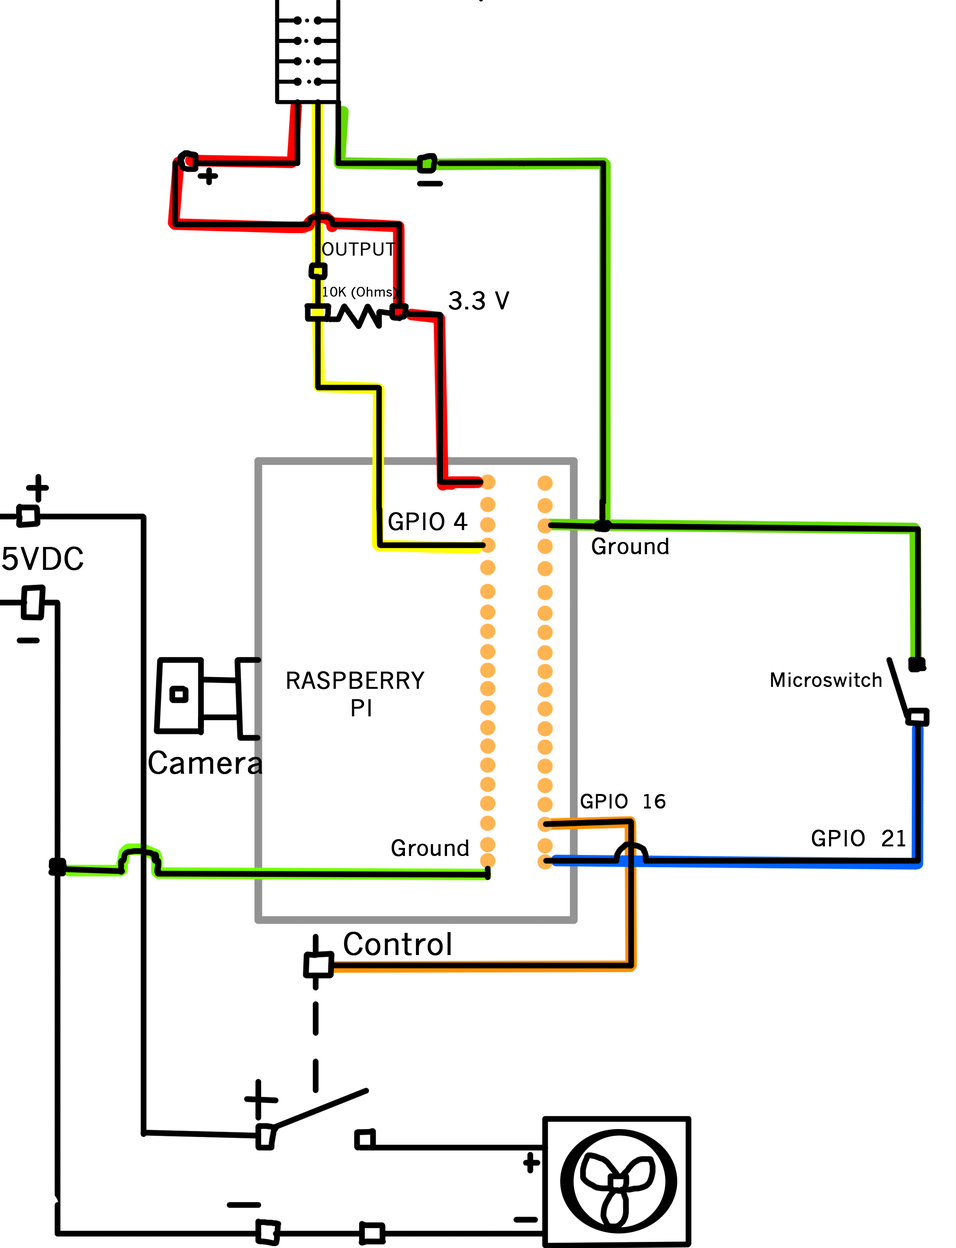
<style>
.page{position:relative;width:956px;height:1248px;background:#ffffff}
.page>*{position:absolute;margin:0}
.t1{font:17.5px "NewsGothicMT";color:#000000;font-weight:bold}
.t2{font:12.7px "NewsGothicMT";color:#000000;font-weight:bold}
.t3{font:23.7px "NewsGothicMT";color:#000000;font-weight:bold}
.t4{font:22.8px "NewsGothicMT";color:#000000;font-weight:bold}
.t5{font:21.7px "NewsGothicMT";color:#000000;font-weight:bold}
.t6{font:30.4px "NewsGothicMT";color:#000000;font-weight:bold}
.t7{font:22.7px "NewsGothicMT";color:#000000;font-weight:bold}
.t8{font:19px "NewsGothicMT";color:#000000;font-weight:bold}
.t9{font:19.1px "NewsGothicMT";color:#000000;font-weight:bold}
.t10{font:21.5px "NewsGothicMT";color:#000000;font-weight:bold}
</style>
<div class="page">
<p class="t1" style="left:322px;top:242px;width:74px;height:14px">OUTPUT</p>
<p class="t2" style="left:323px;top:287px;width:74px;height:12px">10K (Ohms)</p>
<p class="t3" style="left:448px;top:291px;width:61px;height:19px">3.3 V</p>
<p class="t4" style="left:388px;top:512px;width:80px;height:18px">GPIO 4</p>
<p class="t5" style="left:592px;top:537px;width:77px;height:17px">Ground</p>
<p class="t6" style="left:2px;top:546px;width:81px;height:24px">5VDC</p>
<p class="t7" style="left:287px;top:671px;width:137px;height:45px">RASPBERRY <br>PI</p>
<p class="t8" style="left:771px;top:672px;width:110px;height:15px">Microswitch</p>
<p class="t6" style="left:148px;top:750px;width:114px;height:24px">Camera</p>
<p class="t9" style="left:580px;top:793px;width:85px;height:15px">GPIO  16</p>
<p class="t10" style="left:812px;top:829px;width:93px;height:17px">GPIO  21</p>
<p class="t5" style="left:392px;top:839px;width:77px;height:17px">Ground</p>
<p class="t6" style="left:344px;top:931px;width:107px;height:24px">Control</p>
</div>
